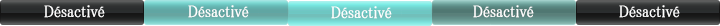
<style>
.page{position:relative;width:720px;height:26px}
.page>*{position:absolute;margin:0}
.t1{font:17.1px "MS-PMincho";color:#ffffff;font-weight:bold;scale:0.84 1}
</style>
<div class="page">
<p class="t1" style="left:44px;top:5px;width:61px;height:13px">Désactivé</p>
<p class="t1" style="left:188px;top:5px;width:61px;height:13px">Désactivé</p>
<p class="t1" style="left:331px;top:6px;width:61px;height:13px">Désactivé</p>
<p class="t1" style="left:473px;top:5px;width:61px;height:13px">Désactivé</p>
<p class="t1" style="left:619px;top:5px;width:61px;height:13px">Désactivé</p>
</div>
